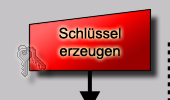
<style>
.page{position:relative;width:170px;height:100px;background:#c6c3c6}
.page>*{position:absolute;margin:0}
.t1{font:14.7px "ArialMT";color:#000000}
</style>
<div class="page">
<p class="t1" style="left:59px;top:27px;width:62px;height:33px;text-align:center">Schlüssel<br>erzeugen</p>
</div>
